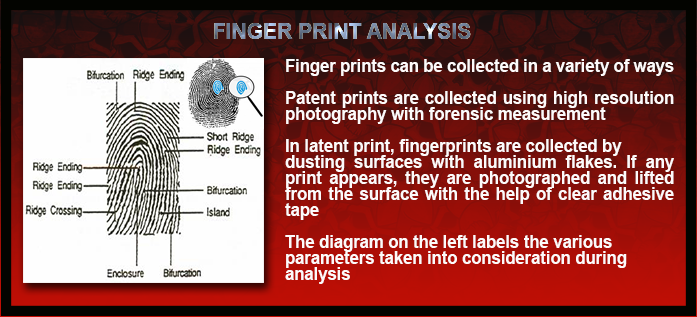
<style>
.page{position:relative;width:697px;height:317px}
.page>*{position:absolute;margin:0}
.t1{font:22.4px "Arial-BoldMT";letter-spacing:0.002em;scale:0.94 1}
.t2{font:17.6px/16px "Arial-BoldMT";letter-spacing:0.002em;color:#fdfafa;scale:0.94 1}
</style>
<div class="page">
<p class="t1" style="left:214px;top:23px;width:257px;height:16px">FINGER PRINT ANALYSIS</p>
<p class="t2" style="left:285px;top:59px;width:389px;height:225px;text-align:justify">Finger prints can be collected in a variety of ways<br><br>Patent prints are collected using high resolution photography with forensic measurement<br><br>In latent print, fingerprints are collected by <br>dusting surfaces with aluminium flakes. If any print appears, they are photographed and lifted from the surface with the help of clear adhesive tape<br><br>The diagram on the left labels the various <br>parameters taken into consideration during <br>analysis</p>
</div>
